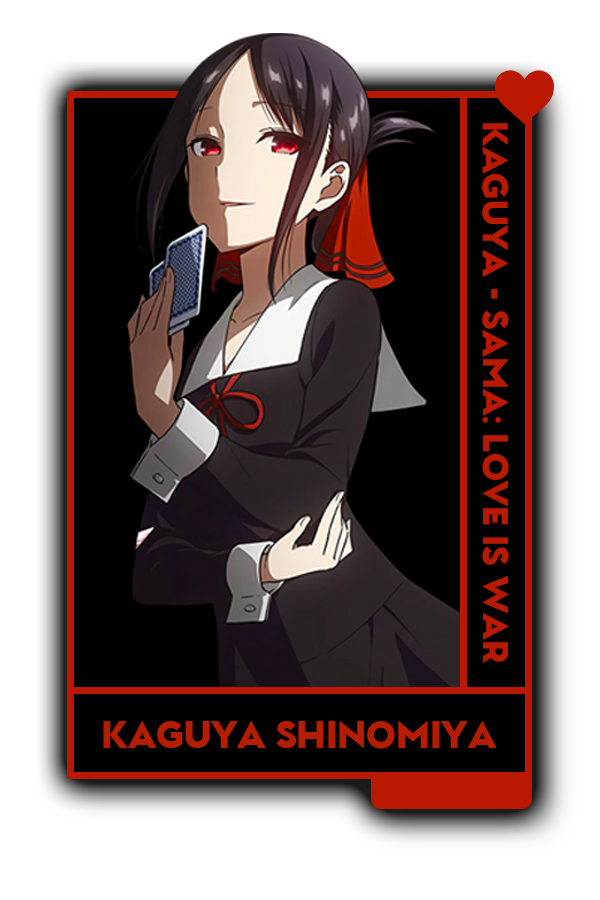
<style>
.page{position:relative;width:600px;height:900px;background:#000000}
.page>*{position:absolute;margin:0}
.t1{font:34px "GarnetCapitalsBlack-Regular";color:#b52616}
.t2{font:35.7px "GarnetCapitalsBlack-Regular";color:#b22818}
</style>
<div class="page">
<p class="t1" style="left:482px;top:123px;width:27px;height:540px;rotate:90deg">Kaguya - Sama: Love is war</p>
<p class="t2" style="left:103px;top:721px;width:393px;height:28px">Kaguya SHiNOMIYA</p>
</div>
